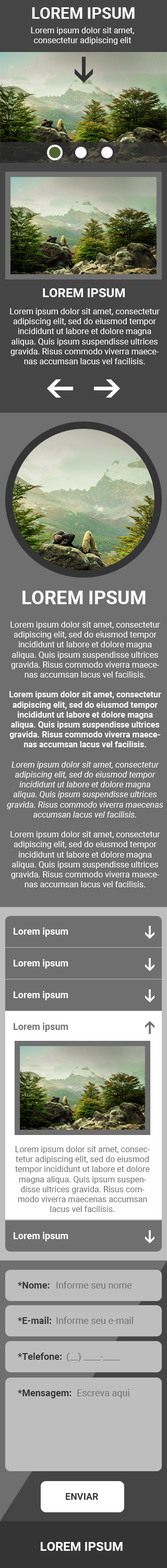
<style>
.page{position:relative;width:167px;height:1568px}
.page>*{position:absolute;margin:0}
.t1{font:15.6px "Roboto-Bold";color:#fefefe}
.t2{font:8.3px "Roboto-Regular";color:#ffffff}
.t3{font:12.5px "Roboto-Bold";color:#ffffff}
.t4{font:18.7px "Roboto-Bold";color:#ffffff}
.t5{font:8.3px "Roboto-Bold";color:#ffffff}
.t6{font:8.3px "Roboto-Italic";color:#ffffff}
.t7{font:9.4px "Roboto-Bold";color:#ffffff}
.t8{font:9.4px "Roboto-Bold";color:#6f6f6f}
.t9{font:8.3px "Roboto-Regular";color:#6f6f6f}
.t10{font:9.4px "Roboto-Bold";color:#333333}
.t11{font:9.4px "Roboto-Regular";color:#707070}
</style>
<div class="page">
<p class="t1" style="left:32px;top:7px;width:102px;height:12px">LOREM IPSUM</p>
<p class="t2" style="left:31px;top:27px;width:103px;height:18px;text-align:center">Lorem ipsum dolor sit amet,<br>consectetur adipiscing elit</p>
<p class="t3" style="left:43px;top:288px;width:81px;height:9px">LOREM IPSUM</p>
<p class="t2" style="left:10px;top:308px;width:149px;height:56px;text-align:center">Lorem ipsum dolor sit amet, consectetur adipiscing elit, sed do eiusmod tempor incididunt ut labore et dolore magna aliqua. Quis ipsum suspendisse ultrices gravida. Risus commodo viverra maecenas accumsan lacus vel facilisis.</p>
<p class="t4" style="left:22px;top:591px;width:123px;height:13px">LOREM IPSUM</p>
<p class="t2" style="left:7px;top:621px;width:156px;height:266px;text-align:center">Lorem ipsum dolor sit amet, consectetur adipiscing elit, sed do eiusmod tempor incididunt ut labore et dolore magna aliqua. Quis ipsum suspendisse ultrices gravida. Risus commodo viverra maecenas accumsan lacus vel facilisis. <br><br><span class="t5">Lorem ipsum dolor sit amet, consectetur adipiscing elit, sed do eiusmod tempor incididunt ut labore et dolore magna aliqua. Quis ipsum suspendisse ultrices gravida. Risus commodo viverra maecenas accumsan lacus vel facilisis. <br></span><br><span class="t6">Lorem ipsum dolor sit amet, consectetur adipiscing elit, sed do eiusmod tempor incididunt ut labore et dolore magna aliqua. Quis ipsum suspendisse ultrices gravida. Risus commodo viverra maecenas accumsan lacus vel facilisis. <br></span><br>Lorem ipsum dolor sit amet, consectetur adipiscing elit, sed do eiusmod tempor incididunt ut labore et dolore magna aliqua. Quis ipsum suspendisse ultrices gravida. Risus commodo viverra maecenas accumsan lacus vel facilisis.</p>
<p class="t7" style="left:14px;top:927px;width:54px;height:10px">Lorem ipsum</p>
<p class="t7" style="left:14px;top:959px;width:54px;height:9px">Lorem ipsum</p>
<p class="t7" style="left:14px;top:991px;width:54px;height:9px">Lorem ipsum</p>
<p class="t8" style="left:14px;top:1023px;width:54px;height:9px">Lorem ipsum</p>
<p class="t9" style="left:15px;top:1146px;width:135px;height:66px;text-align:center">Lorem ipsum dolor sit amet, consectetur adipiscing elit, sed do eiusmod tempor incididunt ut labore et dolore magna aliqua. Quis ipsum suspendisse ultrices gravida. Risus commodo viverra maecenas accumsan lacus vel facilisis.</p>
<p class="t7" style="left:14px;top:1232px;width:54px;height:9px">Lorem ipsum</p>
<p class="t10" style="left:18px;top:1282px;width:31px;height:7px">*Nome:</p>
<p class="t11" style="left:56px;top:1281px;width:76px;height:8px">Informe seu nome</p>
<p class="t10" style="left:18px;top:1317px;width:33px;height:7px">*E-mail:</p>
<p class="t11" style="left:56px;top:1317px;width:77px;height:7px">Informe seu e-mail</p>
<p class="t10" style="left:18px;top:1353px;width:43px;height:7px">*Telefone:</p>
<p class="t11" style="left:67px;top:1353px;width:53px;height:9px">(__) ____-____</p>
<p class="t10" style="left:18px;top:1389px;width:53px;height:9px">*Mensagem:</p>
<p class="t11" style="left:77px;top:1389px;width:52px;height:9px">Escreva aqui</p>
<p class="t10" style="left:66px;top:1493px;width:32px;height:7px">ENVIAR</p>
<p class="t3" style="left:41px;top:1542px;width:81px;height:9px">LOREM IPSUM</p>
</div>
